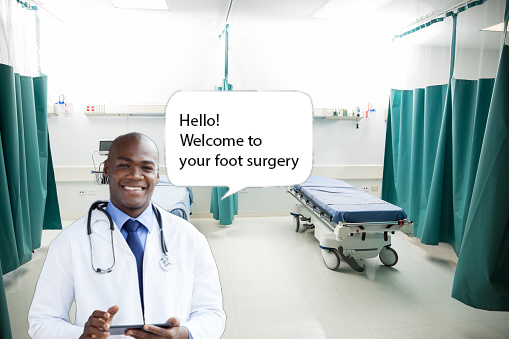
<style>
.page{position:relative;width:509px;height:339px}
.page>*{position:absolute;margin:0}
.t1{font:16.7px "MyriadPro-Regular";color:#000000}
</style>
<div class="page">
<p class="t1" style="left:179px;top:114px;width:120px;height:56px">Hello!<br>Welcome to <br>your foot surgery</p>
</div>
